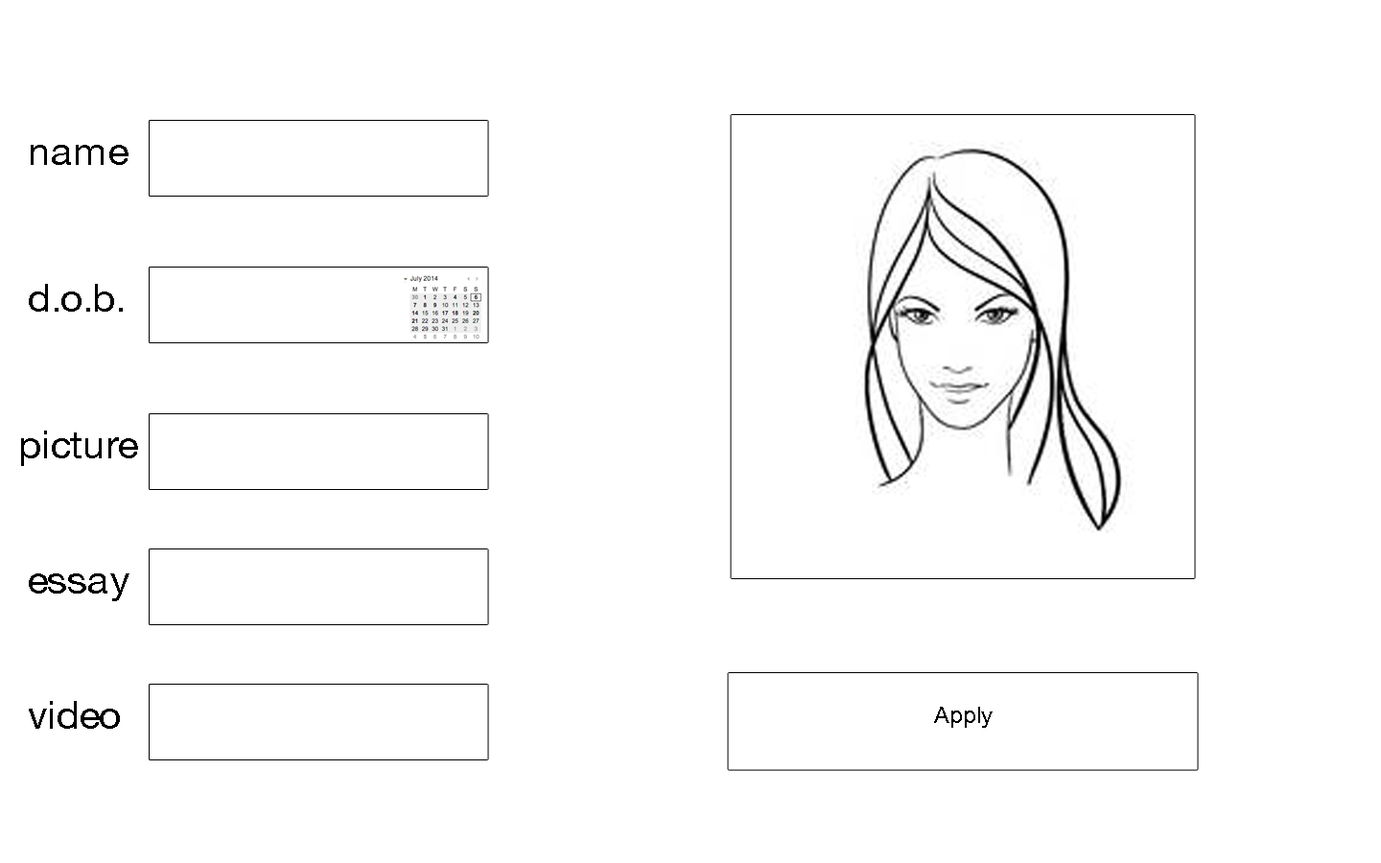
<style>
.page{position:relative;width:1381px;height:863px;background:#ffffff}
.page>*{position:absolute;margin:0}
.t1{font:38.7px "HelveticaNeue";color:#000000}
.t2{font:23px "HelveticaNeue";color:#000000}
.t3{font:11.5px "HelveticaNeue";color:#000000}
</style>
<div class="page">
<p class="t1" style="left:31px;top:145px;width:98px;height:20px">name</p>
<p class="t1" style="left:29px;top:284px;width:94px;height:28px">d.o.b.</p>
<p class="t1" style="left:21px;top:431px;width:117px;height:35px">picture</p>
<p class="t1" style="left:29px;top:574px;width:100px;height:27px">essay</p>
<p class="t1" style="left:29px;top:701px;width:91px;height:28px">video</p>
<p class="t2" style="left:934px;top:707px;width:59px;height:21px"><span class="t3"><br><br></span>Apply</p>
</div>
